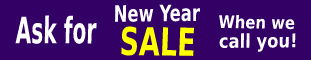
<style>
.page{position:relative;width:311px;height:60px;background:#330066}
.page>*{position:absolute;margin:0}
.t1{font:22.7px "DejaVuSansCondensed-Bold";color:#ffffff;scale:0.81 1}
.t2{font:36.5px "DejaVuSansCondensed-Bold";color:#ffffff;scale:0.61 1}
.t3{font:17.5px "DejaVuSansCondensed-Bold";color:#ffffff;scale:0.95 1}
.t4{font:38.7px "DejaVuSansCondensed-Bold";color:#ffff00;scale:0.78 1}
.t5{font:18.9px "DejaVuSansCondensed-Bold";color:#ffffff;scale:0.96 1}
</style>
<div class="page">
<p class="t1" style="left:115px;top:4px;width:85px;height:18px;rotate:-1deg">New Year</p>
<p class="t2" style="left:15px;top:15px;width:82px;height:29px">Ask for</p>
<p class="t3" style="left:219px;top:15px;width:76px;height:15px;rotate:1deg">When we</p>
<p class="t4" style="left:121px;top:26px;width:73px;height:30px;rotate:1deg">SALE</p>
<p class="t5" style="left:219px;top:33px;width:77px;height:19px">call you!</p>
</div>
